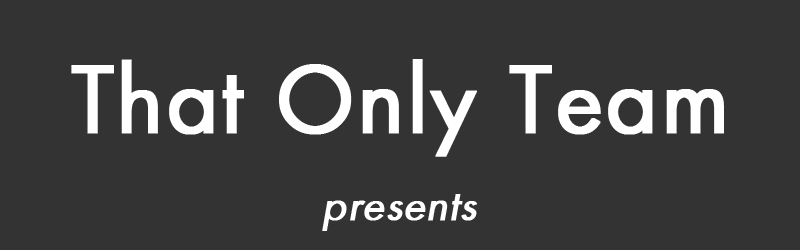
<style>
.page{position:relative;width:800px;height:250px;background:#333333}
.page>*{position:absolute;margin:0}
.t1{font:100px "Futura-Normal";color:#ffffff;font-weight:bold}
.t2{font:45.8px "Futura-Normal";color:#ffffff;font-weight:bold;font-style:italic}
</style>
<div class="page">
<p class="t1" style="left:71px;top:59px;width:653px;height:98px">That Only Team</p>
<p class="t2" style="left:322px;top:194px;width:155px;height:37px">presents</p>
</div>
